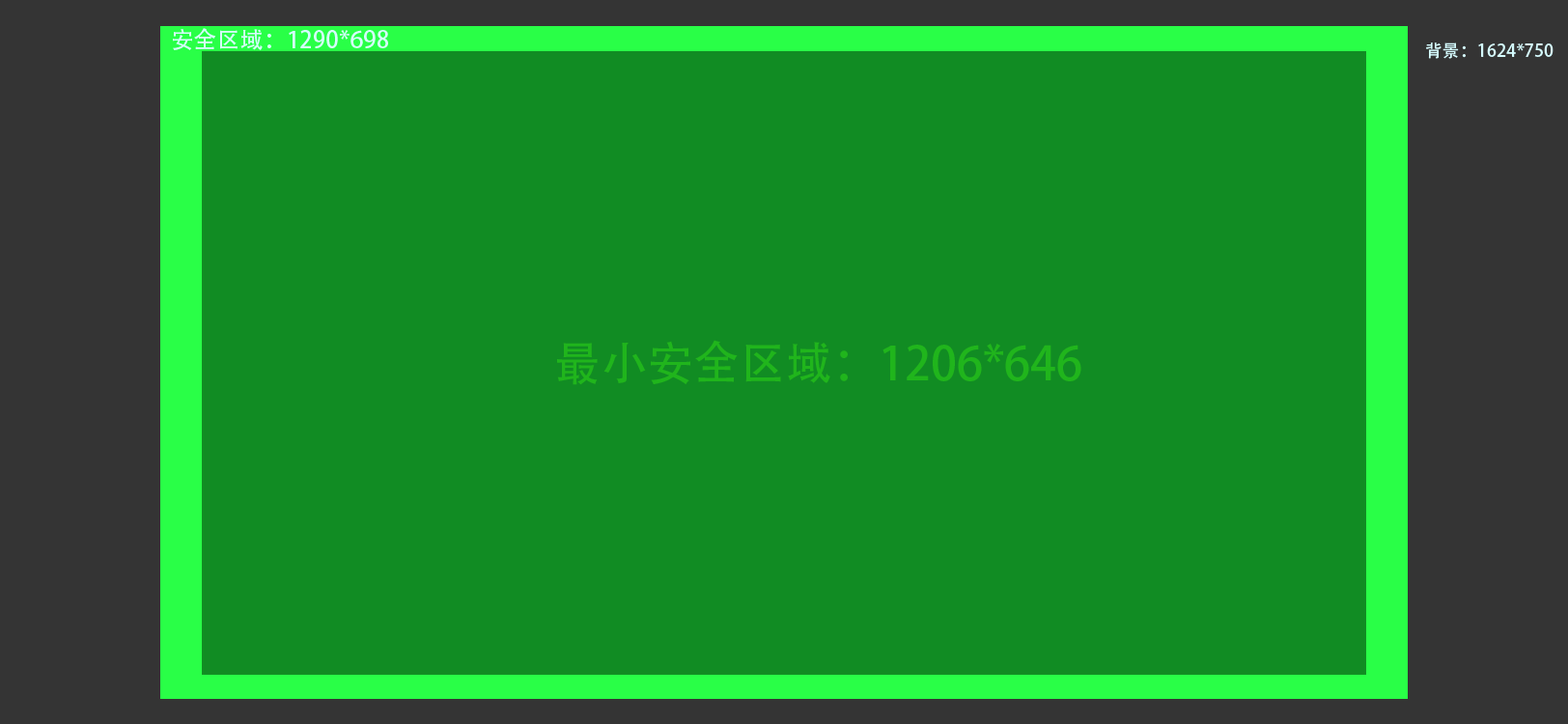
<style>
.page{position:relative;width:1568px;height:724px;background:#118c23}
.page>*{position:absolute;margin:0}
.t1{font:23.2px "AdobeHeitiStd-Regular";color:#d5fcff}
.t2{font:17.4px "AdobeHeitiStd-Regular";color:#d5fcff}
.t3{font:46.3px "AdobeHeitiStd-Regular";color:#20b51c}
</style>
<div class="page">
<p class="t1" style="left:173px;top:28px;width:215px;height:22px">安全区域：1290*698</p>
<p class="t2" style="left:1426px;top:42px;width:128px;height:17px">背景：1624*750</p>
<p class="t3" style="left:557px;top:340px;width:524px;height:45px">最小安全区域：1206*646</p>
</div>
